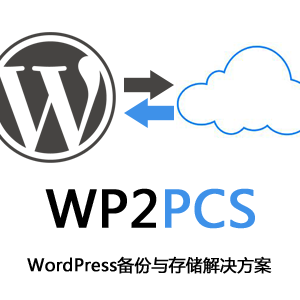
<style>
.page{position:relative;width:300px;height:300px;background:#ffffff}
.page>*{position:absolute;margin:0}
.t1{font:50px "MicrosoftYaHei";color:#000000;font-weight:bold}
.t2{font:50px "MicrosoftYaHei";color:#3e91e9;font-weight:bold}
.t3{font:16.7px "MicrosoftYaHei";color:#000000;font-weight:bold}
</style>
<div class="page">
<p class="t1" style="left:45px;top:188px;width:210px;height:41px">WP2<span class="t2">PCS</span></p>
<p class="t3" style="left:27px;top:256px;width:245px;height:18px">WordPress备份与存储解决方案</p>
</div>
